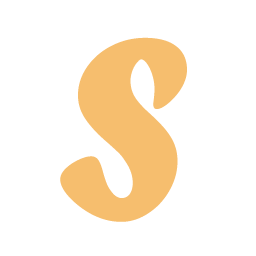
<style>
.page{position:relative;width:256px;height:256px;background:#ffffff}
.page>*{position:absolute;margin:0}
.t1{font:266.7px "ForteMT";color:#f6be6e}
</style>
<div class="page">
<p class="t1" style="left:60px;top:37px;width:127px;height:185px">S</p>
</div>
